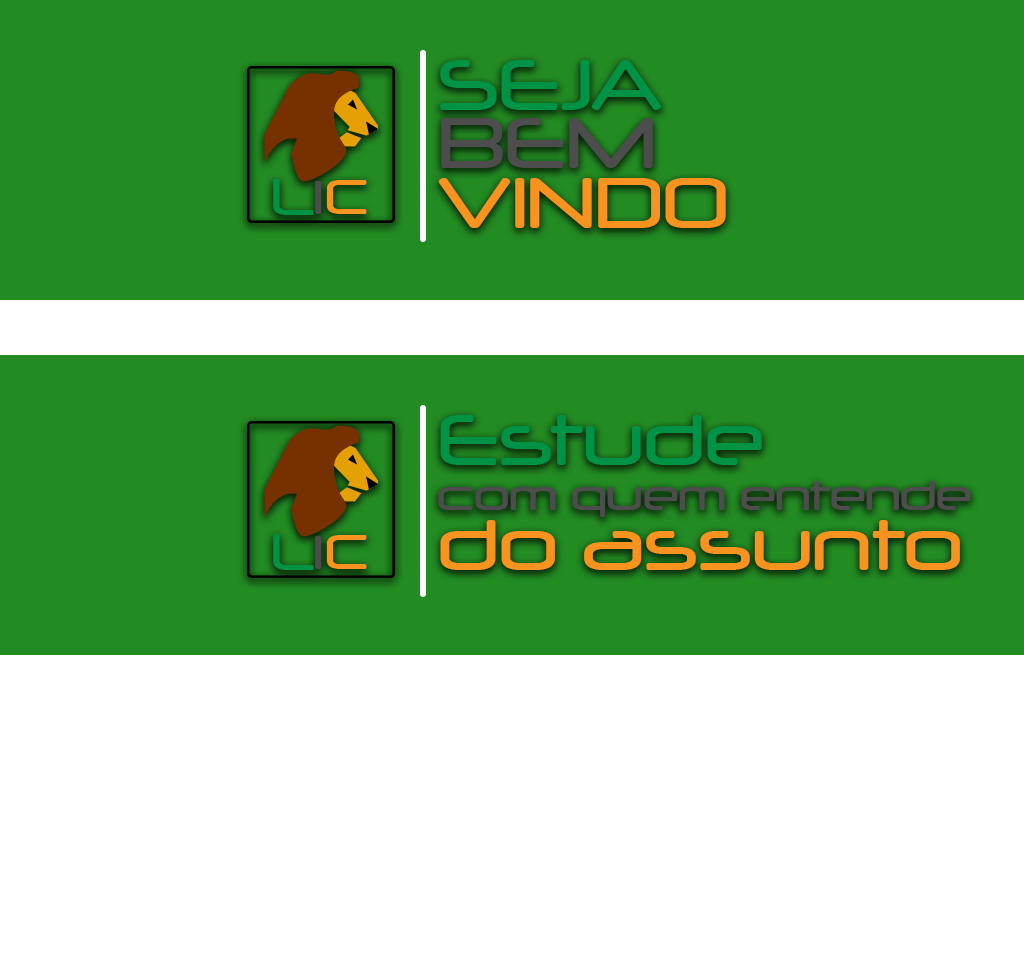
<style>
.page{position:relative;width:1024px;height:956px;background:#228b22}
.page>*{position:absolute;margin:0}
.t1{font:68.3px "Neuropol-Regular";color:#009245}
.t2{font:68.3px "Neuropol-Regular";color:#4d4d4d}
.t3{font:68.3px "Neuropol-Regular";color:#f7931e}
.t4{font:40.7px "Neuropol-Regular";color:#4d4d4d}
</style>
<div class="page">
<p class="t1" style="left:440px;top:60px;width:221px;height:50px">SEJA</p>
<p class="t2" style="left:441px;top:118px;width:212px;height:50px">BEM</p>
<p class="t3" style="left:438px;top:178px;width:288px;height:50px">VINDO</p>
<p class="t1" style="left:440px;top:415px;width:322px;height:50px">Estude</p>
<p class="t4" style="left:438px;top:481px;width:533px;height:36px">com quem entende</p>
<p class="t3" style="left:440px;top:520px;width:520px;height:50px">do assunto</p>
</div>
